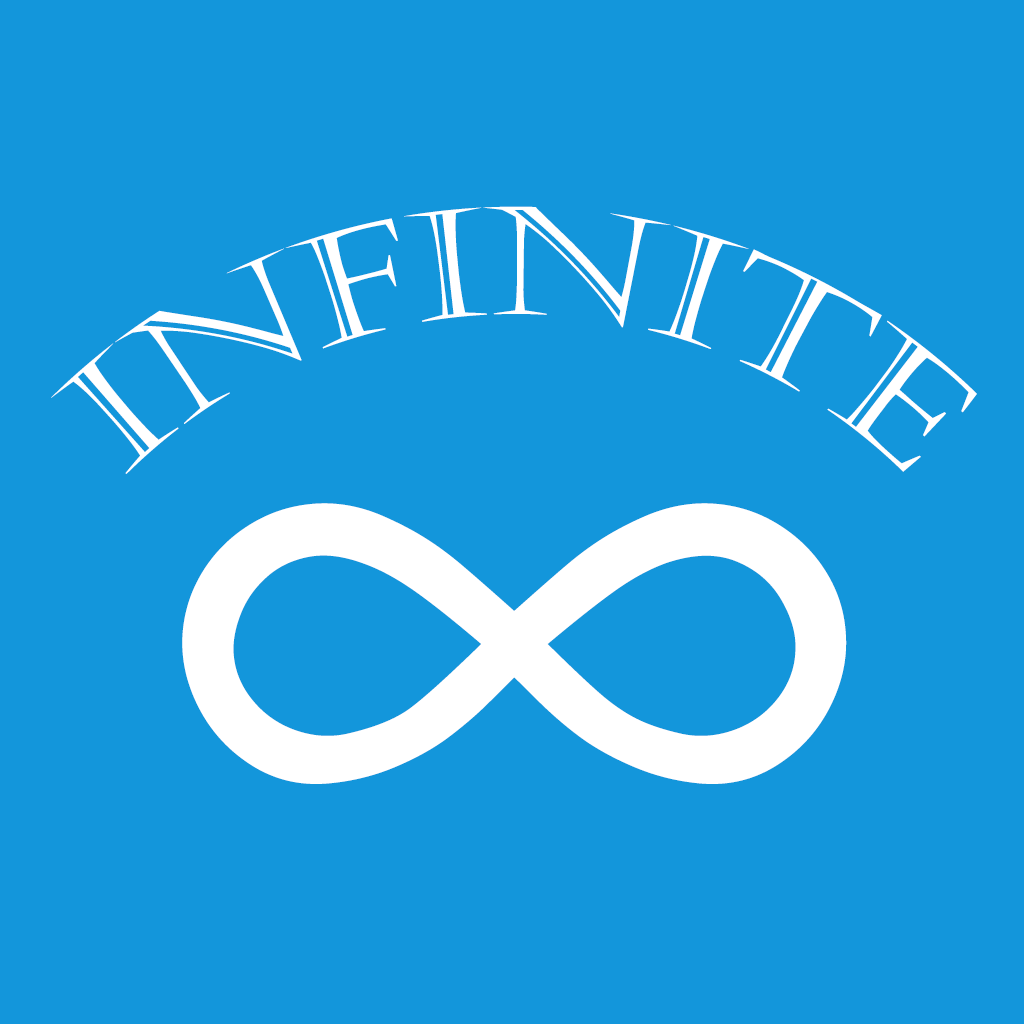
<style>
.page{position:relative;width:1024px;height:1024px;background:#1396db}
.page>*{position:absolute;margin:0}
.t1{font:150px "Castellar";color:#ffffff;text-transform:uppercase}
.t2{font:1000px "BrushScriptMT";color:#ffffff;text-transform:uppercase}
</style>
<div class="page">
<p class="t1" style="left:51px;top:206px;width:926px;height:268px">infinite</p>
<p class="t2" style="left:182px;top:503px;width:665px;height:281px">∞</p>
</div>
